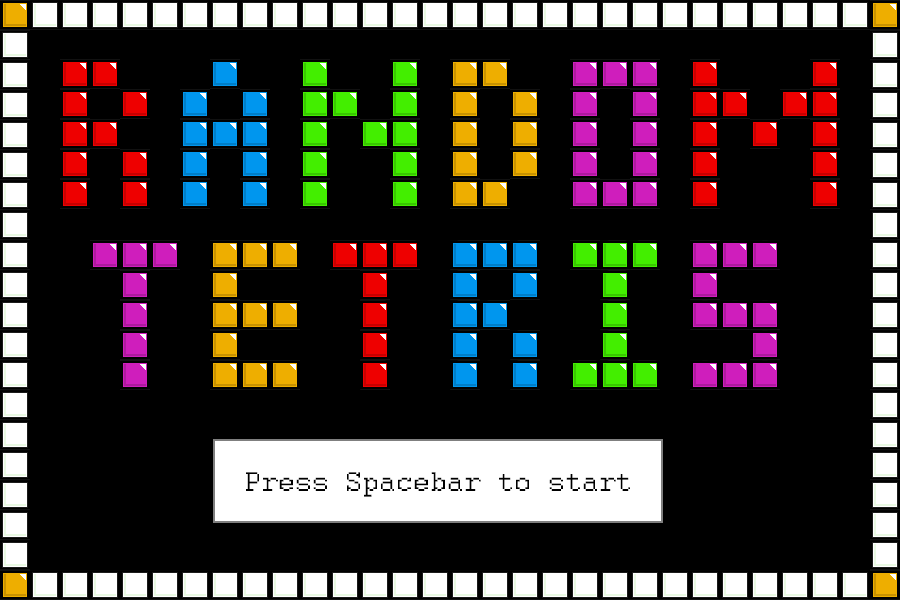
<style>
.page{position:relative;width:900px;height:600px;background:#000000}
.page>*{position:absolute;margin:0}
.t1{font:30px "Courier";color:#000000}
</style>
<div class="page">
<p class="t1" style="left:246px;top:472px;width:384px;height:25px">Press Spacebar to start</p>
</div>
